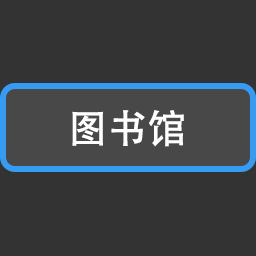
<style>
.page{position:relative;width:256px;height:256px;background:#333333}
.page>*{position:absolute;margin:0}
.t1{font:39px "AdobeHeitiStd-Regular";color:#ffffff;font-weight:bold}
</style>
<div class="page">
<p class="t1" style="left:72px;top:110px;width:112px;height:37px">图书馆</p>
</div>
